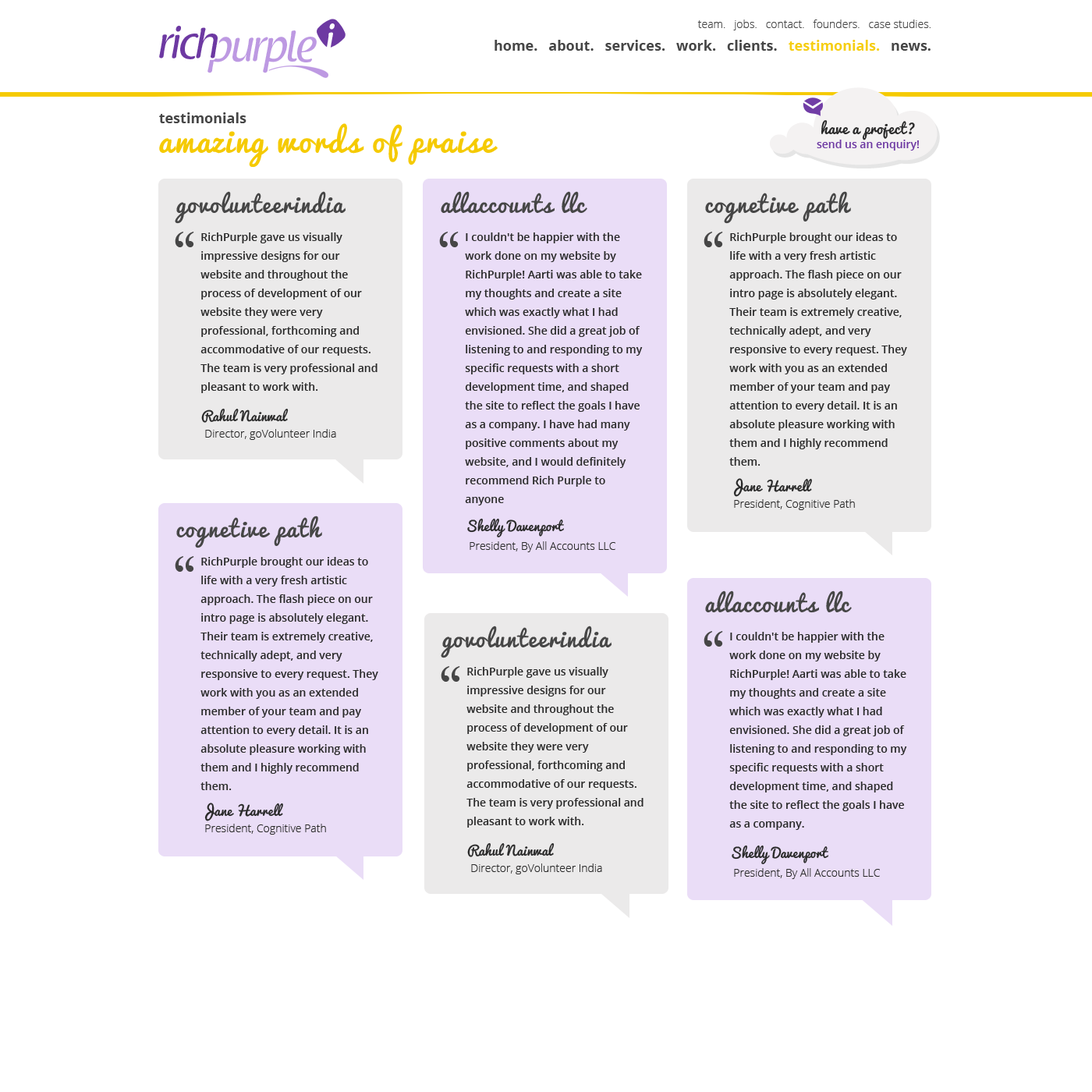
<style>
.page{position:relative;width:1092px;height:1092px;background:#ffffff}
.page>*{position:absolute;margin:0}
.t1{font:43.5px "RaspoutineClassic";letter-spacing:-0.05em;color:#6d39a2}
.t2{font:42.3px "RaspoutineClassic";letter-spacing:-0.05em;color:#ffffff}
.t3{font:10.9px "OpenSans-Light";color:#464646}
.t4{font:43.5px "RaspoutineClassic";letter-spacing:-0.05em;color:#bd99e2}
.t5{font:14px "OpenSans-Bold";color:#464646}
.t6{font:14px "OpenSans-Bold";color:#f6ce13}
.t7{font:31.2px "Pacifico-Regular";letter-spacing:0.06em;color:#f5ca01}
.t8{font:22.6px "Pacifico-Regular";letter-spacing:0.06em;color:#464646}
.t9{font:64.7px "Perpetua";color:#464646}
.t10{font:10.9px/18.7px "OpenSans-Semibold";color:#2a2a2a}
.t11{font:13.3px "Pacifico-Regular";letter-spacing:0.02em;color:#2a2a2a}
.t12{font:10.9px "OpenSans-Light";color:#2a2a2a}
</style>
<div class="page">
<p class="t1" style="left:159px;top:26px;width:59px;height:33px">rich</p>
<p class="t2" style="left:325px;top:23px;width:10px;height:32px">i</p>
<p class="t3" style="left:697px;top:19px;width:234px;height:11px">team.   jobs.   contact.   founders.   case studies.</p>
<p class="t4" style="left:207px;top:30px;width:110px;height:43px">purple</p>
<p class="t5" style="left:495px;top:40px;width:436px;height:11px">home.   about.   services.   work.   clients.   <span class="t6">testimonials. </span>  news.</p>
<p class="t5" style="left:159px;top:112px;width:87px;height:11px">testimonials</p>
<p class="t7" style="left:159px;top:123px;width:339px;height:45px">amazing words of praise</p>
<p class="t8" style="left:175px;top:191px;width:171px;height:33px">govolunteerindia</p>
<p class="t8" style="left:441px;top:191px;width:146px;height:23px">allaccounts llc</p>
<p class="t8" style="left:705px;top:191px;width:146px;height:33px">cognetive path</p>
<p class="t9" style="left:175px;top:232px;width:19px;height:15px">“</p>
<p class="t10" style="left:200px;top:232px;width:178px;height:161px">RichPurple gave us visually impressive designs for our website and throughout the process of development of our website they were very professional, forthcoming and accommodative of our requests. The team is very professional and pleasant to work with.</p>
<p class="t9" style="left:439px;top:232px;width:20px;height:15px">“</p>
<p class="t10" style="left:465px;top:232px;width:178px;height:273px">I couldn't be happier with the work done on my website by RichPurple! Aarti was able to take my thoughts and create a site which was exactly what I had envisioned. She did a great job of listening to and responding to my specific requests with a short development time, and shaped the site to reflect the goals I have as a company. I have had many positive comments about my website, and I would definitely recommend Rich Purple to anyone</p>
<p class="t9" style="left:704px;top:232px;width:19px;height:15px">“</p>
<p class="t10" style="left:729px;top:232px;width:178px;height:234px">RichPurple brought our ideas to life with a very fresh artistic approach. The flash piece on our intro page is absolutely elegant. Their team is extremely creative, technically adept, and very responsive to every request. They work with you as an extended member of your team and pay attention to every detail. It is an absolute pleasure working with them and I highly recommend them.</p>
<p class="t11" style="left:201px;top:408px;width:88px;height:15px">Rahul Nainwal</p>
<p class="t12" style="left:205px;top:429px;width:131px;height:11px">Director, goVolunteer India</p>
<p class="t11" style="left:733px;top:478px;width:79px;height:19px">Jane Harrell</p>
<p class="t12" style="left:734px;top:499px;width:121px;height:11px">President, Cognitive Path</p>
<p class="t8" style="left:176px;top:516px;width:146px;height:32px">cognetive path</p>
<p class="t11" style="left:467px;top:518px;width:97px;height:19px">Shelly Davenport</p>
<p class="t12" style="left:470px;top:541px;width:145px;height:11px">President, By All Accounts LLC</p>
<p class="t9" style="left:175px;top:556px;width:19px;height:16px">“</p>
<p class="t10" style="left:200px;top:557px;width:178px;height:233px">RichPurple brought our ideas to life with a very fresh artistic approach. The flash piece on our intro page is absolutely elegant. Their team is extremely creative, technically adept, and very responsive to every request. They work with you as an extended member of your team and pay attention to every detail. It is an absolute pleasure working with them and I highly recommend them.</p>
<p class="t8" style="left:705px;top:590px;width:147px;height:23px">allaccounts llc</p>
<p class="t8" style="left:441px;top:626px;width:171px;height:32px">govolunteerindia</p>
<p class="t9" style="left:704px;top:631px;width:19px;height:16px">“</p>
<p class="t10" style="left:729px;top:632px;width:178px;height:198px">I couldn't be happier with the work done on my website by RichPurple! Aarti was able to take my thoughts and create a site which was exactly what I had envisioned. She did a great job of listening to and responding to my specific requests with a short development time, and shaped the site to reflect the goals I have as a company.</p>
<p class="t9" style="left:441px;top:666px;width:19px;height:16px">“</p>
<p class="t10" style="left:466px;top:667px;width:177px;height:161px">RichPurple gave us visually impressive designs for our website and throughout the process of development of our website they were very professional, forthcoming and accommodative of our requests. The team is very professional and pleasant to work with.</p>
<p class="t11" style="left:204px;top:803px;width:79px;height:18px">Jane Harrell</p>
<p class="t12" style="left:205px;top:824px;width:121px;height:11px">President, Cognitive Path</p>
<p class="t11" style="left:467px;top:842px;width:88px;height:15px">Rahul Nainwal</p>
<p class="t11" style="left:732px;top:845px;width:96px;height:19px">Shelly Davenport</p>
<p class="t12" style="left:471px;top:863px;width:131px;height:11px">Director, goVolunteer India</p>
<p class="t12" style="left:734px;top:868px;width:146px;height:11px">President, By All Accounts LLC</p>
</div>
